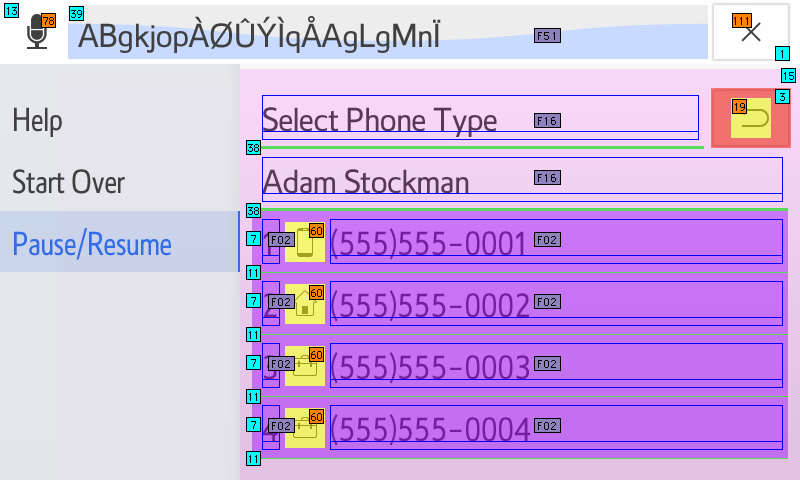
<style>
.page{position:relative;width:800px;height:480px}
.page>*{position:absolute;margin:0}
.t1{font:30px "Tfont1502_T1S";color:#404041}
.t2{font:30px "Tfont1502_T2S";color:#404041}
.t3{font:30px/62px "Tfont1502_T1S";color:#583859}
.t4{font:30px "Tfont1502_T2S";color:#336ce6}
.t5{font:30px/62px "Tfont1502_T2S"}
.t6{font:30px/62px "Tfont1502_T2S";color:#7320a0}
</style>
<div class="page">
<p class="t1" style="left:78px;top:16px;width:363px;height:37px">ABgkjopÀØÛÝÌqÅAgLgMnÏ</p>
<p class="t2" style="left:14px;top:107px;width:48px;height:30px">Help</p>
<p class="t3" style="left:262px;top:107px;width:235px;height:87px">Select Phone Type<br>Adam Stockman</p>
<p class="t2" style="left:13px;top:169px;width:112px;height:25px">Start Over</p>
<p class="t4" style="left:14px;top:228px;width:157px;height:32px">Pause/Resume</p>
<p class="t5" style="left:262px;top:231px;width:16px;height:210px">1<br>2<br>3<br>4</p>
<p class="t6" style="left:331px;top:228px;width:200px;height:218px">(555)555-0001<br>(555)555-0002<br>(555)555-0003<br>(555)555-0004</p>
</div>
